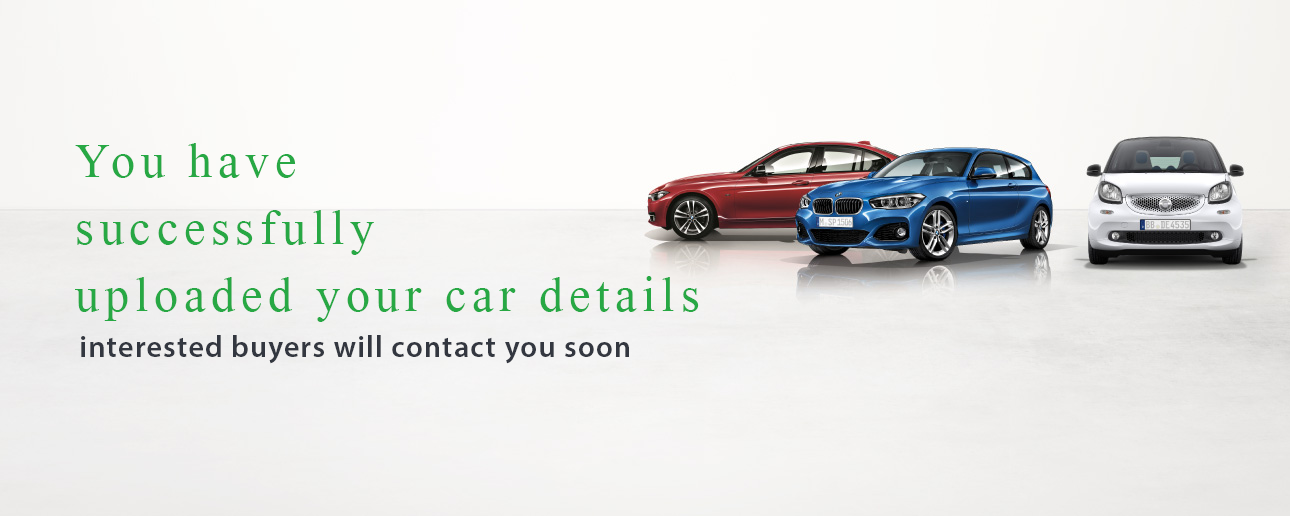
<style>
.page{position:relative;width:1290px;height:516px}
.page>*{position:absolute;margin:0}
.t1{font:72px/67px "MicrosoftHimalaya";letter-spacing:0.08em;color:#27a844}
.t2{font:30px "MyriadPro-Semibold";letter-spacing:0.04em;color:#333740}
</style>
<div class="page">
<p class="t1" style="left:75px;top:143px;width:624px;height:179px">You have<br>successfully<br>uploaded your car details</p>
<p class="t2" style="left:81px;top:335px;width:548px;height:29px">interested buyers will contact you soon</p>
</div>
